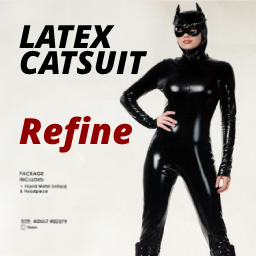
<style>
.page{position:relative;width:256px;height:256px}
.page>*{position:absolute;margin:0}
.t1{font:32px/26px "OpenSans-ExtraboldItalic";color:#000000;text-transform:uppercase}
.t2{font:36px "OpenSans-ExtraboldItalic";color:#900000}
</style>
<div class="page">
<p class="t1" style="left:19px;top:25px;width:129px;height:50px">Latex<br>Catsuit</p>
<p class="t2" style="left:19px;top:116px;width:114px;height:37px">Refine</p>
</div>
